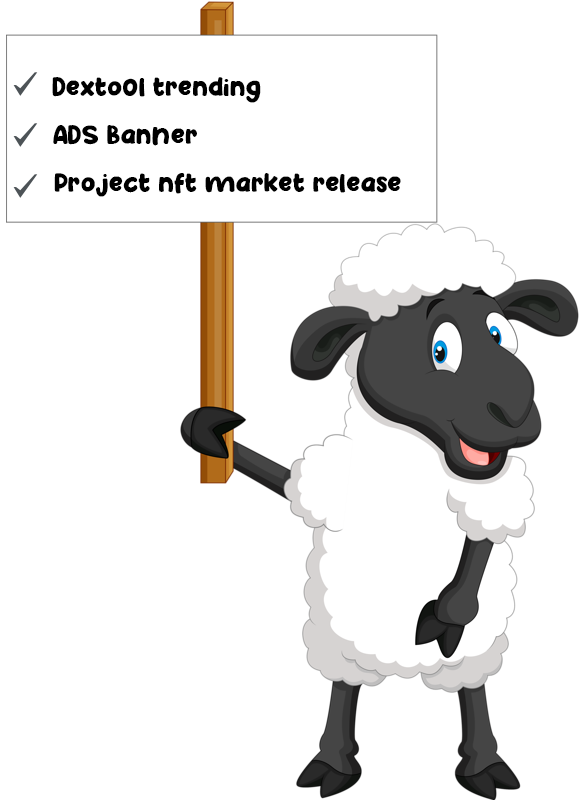
<style>
.page{position:relative;width:586px;height:800px;background:#ffffff}
.page>*{position:absolute;margin:0}
.t1{font:25px "Happy-School";color:#000000}
</style>
<div class="page">
<p class="t1" style="left:52px;top:77px;width:209px;height:26px">Dextool trending</p>
<p class="t1" style="left:53px;top:125px;width:144px;height:21px">ADS Banner</p>
<p class="t1" style="left:54px;top:173px;width:347px;height:24px">Project nft market release</p>
</div>
